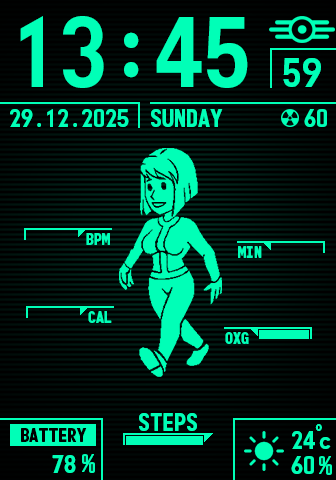
<style>
.page{position:relative;width:336px;height:480px;background:#000000}
.page>*{position:absolute;margin:0}
.t1{font:96px "Monofonto-Regular";color:#00ffb7}
.t2{font:40px "Monofonto-Regular";color:#00ffb7}
.t3{font:24px "Monofonto-Regular";color:#00ffb7}
.t4{font:16px "Monofonto-Regular";color:#00ffb7}
.t5{font:13.3px "Monofonto-Regular";color:#00ffb7}
.t6{font:18.7px "Monofonto-Regular";color:#000000}
</style>
<div class="page">
<p class="t1" style="left:20px;top:16px;width:228px;height:72px">13:45</p>
<p class="t2" style="left:283px;top:58px;width:38px;height:29px">59</p>
<p class="t3" style="left:10px;top:109px;width:119px;height:18px">29.12.2025</p>
<p class="t3" style="left:151px;top:109px;width:72px;height:18px">SUNDAY</p>
<p class="t3" style="left:304px;top:109px;width:23px;height:18px">60</p>
<p class="t4" style="left:86px;top:233px;width:24px;height:12px">BPM</p>
<p class="t4" style="left:238px;top:246px;width:24px;height:12px">MIN</p>
<p class="t4" style="left:88px;top:311px;width:24px;height:12px">CAL</p>
<p class="t4" style="left:225px;top:332px;width:24px;height:12px">OXG</p>
<p class="t3" style="left:139px;top:413px;width:58px;height:18px">STEPS</p>
<p class="t5" style="left:315px;top:424px;width:7px;height:7px">o</p>
<p class="t6" style="left:21px;top:428px;width:66px;height:14px">BATTERY</p>
<p class="t3" style="left:292px;top:431px;width:23px;height:18px">24</p>
<p class="t3" style="left:319px;top:437px;width:12px;height:12px">c</p>
<p class="t3" style="left:52px;top:455px;width:24px;height:18px">78</p>
<p class="t3" style="left:82px;top:454px;width:13px;height:19px">%</p>
<p class="t3" style="left:291px;top:456px;width:23px;height:18px">60</p>
<p class="t3" style="left:319px;top:456px;width:13px;height:19px">%</p>
</div>
